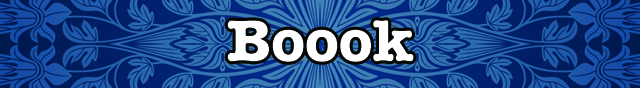
<style>
.page{position:relative;width:640px;height:88px}
.page>*{position:absolute;margin:0}
.t1{font:60px "AmericanTypewriter-Bold";color:#ffffff}
</style>
<div class="page">
<p class="t1" style="left:227px;top:20px;width:187px;height:42px">Boook</p>
</div>
